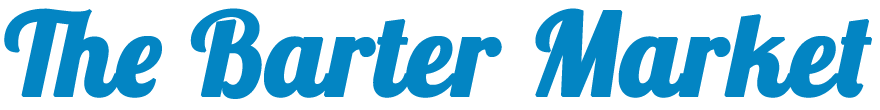
<style>
.page{position:relative;width:880px;height:110px;background:#ffffff}
.page>*{position:absolute;margin:0}
.t1{font:113.6px "Lobster-Regular";color:#0385c3;font-weight:bold}
</style>
<div class="page">
<p class="t1" style="left:4px;top:8px;width:868px;height:91px">The Barter Market</p>
</div>
